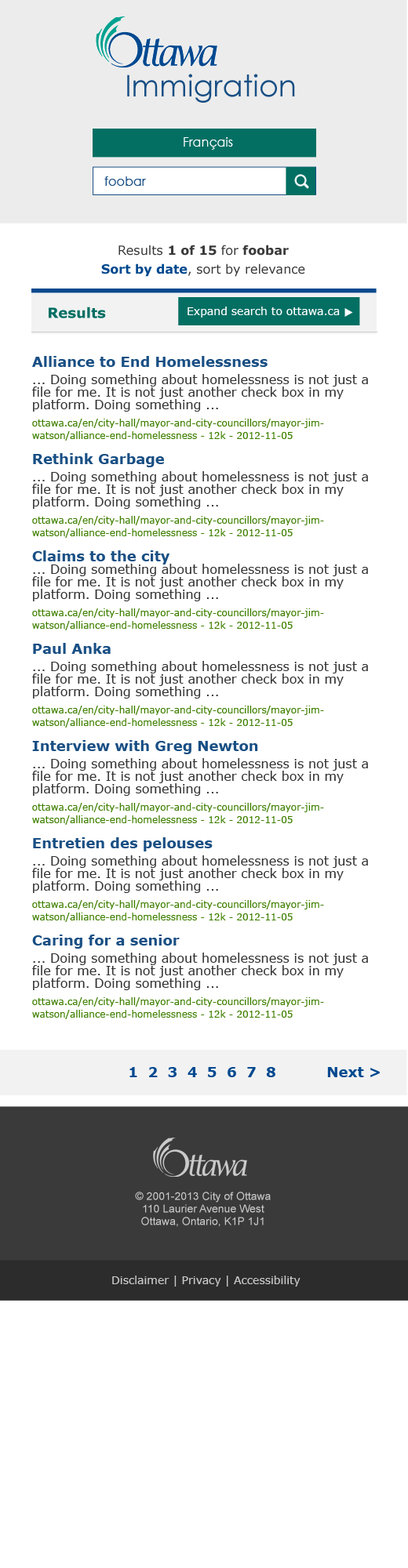
<style>
.page{position:relative;width:408px;height:1568px;background:#ffffff}
.page>*{position:absolute;margin:0}
.t1{font:29.8px "CenturyGothic";color:#194f84}
.t2{font:12.5px "CenturyGothic";color:#ffffff}
.t3{font:12.5px "CenturyGothic";color:#194f84}
.t4{font:12.5px "Verdana";color:#3a3a3a}
.t5{font:12.5px "Verdana-Bold";color:#3a3a3a}
.t6{font:12.5px "Verdana-Bold";color:#00498f}
.t7{font:14.1px "Verdana-Bold";color:#036f63}
.t8{font:11px "Verdana";color:#ffffff}
.t9{font:12.5px/12.5px "Verdana";color:#333333}
.t10{font:14.1px/12.5px "Verdana-Bold";color:#194f84}
.t11{font:9.4px/12.5px "Verdana";color:#3f8000}
.t12{font:14.1px "Verdana-Bold";color:#00498f}
.t13{font:11px/12.5px "ArialMT";color:#cacaca}
.t14{font:11px "Verdana";color:#cacaca}
</style>
<div class="page">
<p class="t1" style="left:127px;top:74px;width:168px;height:29px">Immigration</p>
<p class="t2" style="left:183px;top:137px;width:50px;height:13px">Français</p>
<p class="t3" style="left:104px;top:176px;width:42px;height:10px">foobar</p>
<p class="t4" style="left:118px;top:245px;width:171px;height:11px">Results <span class="t5">1 of 15 </span>for<span class="t5"> foobar</span></p>
<p class="t4" style="left:101px;top:263px;width:204px;height:14px"><span class="t6">Sort by date</span>, sort by relevance</p>
<p class="t7" style="left:49px;top:307px;width:57px;height:11px">Results</p>
<p class="t8" style="left:187px;top:307px;width:152px;height:11px">Expand search to ottawa.ca</p>
<p class="t9" style="left:32px;top:356px;width:336px;height:663px"><span class="t10">Alliance to End Homelessness<br><br></span>... Doing something about homelessness is not just a file for me. It is not just another check box in my platform. Doing something ...<br><br><span class="t11">ottawa.ca/en/city-hall/mayor-and-city-councillors/mayor-jim-watson/alliance-end-homelessness - 12k - 2012-11-05<br><br></span><span class="t10">Rethink Garbage<br><br></span>... Doing something about homelessness is not just a file for me. It is not just another check box in my platform. Doing something ...<br><br><span class="t11">ottawa.ca/en/city-hall/mayor-and-city-councillors/mayor-jim-watson/alliance-end-homelessness - 12k - 2012-11-05<br><br></span><span class="t10">Claims to the city<br></span>... Doing something about homelessness is not just a file for me. It is not just another check box in my platform. Doing something ...<br><br><span class="t11">ottawa.ca/en/city-hall/mayor-and-city-councillors/mayor-jim-watson/alliance-end-homelessness - 12k - 2012-11-05<br><br></span><span class="t10">Paul Anka<br><br></span>... Doing something about homelessness is not just a file for me. It is not just another check box in my platform. Doing something ...<br><br><span class="t11">ottawa.ca/en/city-hall/mayor-and-city-councillors/mayor-jim-watson/alliance-end-homelessness - 12k - 2012-11-05<br><br></span><span class="t10">Interview with Greg Newton<br><br></span>... Doing something about homelessness is not just a file for me. It is not just another check box in my platform. Doing something ...<br><br><span class="t11">ottawa.ca/en/city-hall/mayor-and-city-councillors/mayor-jim-watson/alliance-end-homelessness - 12k - 2012-11-05<br><br></span><span class="t10">Entretien des pelouses<br><br></span>... Doing something about homelessness is not just a file for me. It is not just another check box in my platform. Doing something ...<br><br><span class="t11">ottawa.ca/en/city-hall/mayor-and-city-councillors/mayor-jim-watson/alliance-end-homelessness - 12k - 2012-11-05<br><br></span><span class="t10">Caring for a senior<br><br></span>... Doing something about homelessness is not just a file for me. It is not just another check box in my platform. Doing something ...<br><br><span class="t11">ottawa.ca/en/city-hall/mayor-and-city-councillors/mayor-jim-watson/alliance-end-homelessness - 12k - 2012-11-05</span></p>
<p class="t12" style="left:129px;top:1067px;width:146px;height:10px">1  2  3  4  5  6  7  8</p>
<p class="t12" style="left:327px;top:1067px;width:52px;height:10px">Next &gt;</p>
<p class="t13" style="left:135px;top:1192px;width:135px;height:35px;text-align:center">© 2001-2013 City of Ottawa<br>110 Laurier Avenue West <br>Ottawa, Ontario, K1P 1J1</p>
<p class="t14" style="left:112px;top:1276px;width:188px;height:11px">Disclaimer | Privacy | Accessibility</p>
</div>
